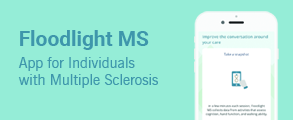
<style>
.page{position:relative;width:293px;height:120px;background:#95edd7}
.page>*{position:absolute;margin:0}
.t1{font:20.8px "Roboto-Bold";color:#3e96ab}
.t2{font:14.6px "NewsGothicBT-Roman";color:#3e96ab}
</style>
<div class="page">
<p class="t1" style="left:20px;top:30px;width:129px;height:20px">Floodlight MS</p>
<p class="t2" style="left:18px;top:57px;width:140px;height:31px">App for Individuals<br>with Multiple Sclerosis</p>
</div>
